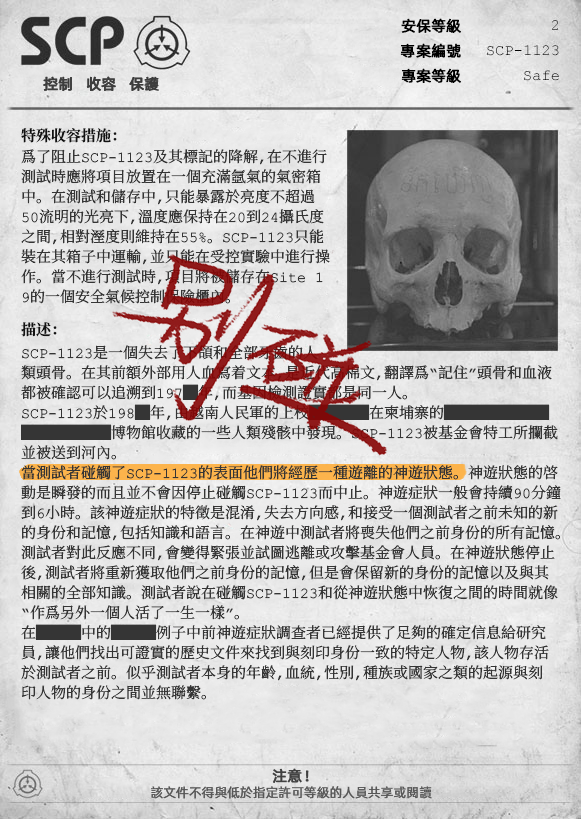
<style>
.page{position:relative;width:581px;height:819px}
.page>*{position:absolute;margin:0}
.t1{font:15px "AlibabaPuHuiTiR";color:#000000;font-weight:bold}
.t2{font:15px "AlibabaPuHuiTiR";color:#3d3d3d;font-weight:bold}
.t3{font:15px "ContainmentBreach-Bold";color:#121212}
.t4{font:15px/20px "ContainmentBreach-Regular";color:#353535}
.t5{font:15px "AlibabaPuHuiTiR";color:#414141;font-weight:bold}
.t6{font:13px "AlibabaPuHuiTiR";color:#575757}
</style>
<div class="page">
<p class="t1" style="left:401px;top:18px;width:60px;height:15px">安保等級</p>
<p class="t1" style="left:400px;top:43px;width:61px;height:15px">專案編號</p>
<p class="t2" style="left:43px;top:76px;width:115px;height:15px">控制   收容   保护</p>
<p class="t2" style="left:43px;top:76px;width:116px;height:15px">控制   收容   保護</p>
<p class="t1" style="left:401px;top:68px;width:60px;height:15px">專案等級</p>
<p class="t3" style="left:21px;top:128px;width:96px;height:15px">特殊收容措施：</p>
<p class="t4" style="left:21px;top:149px;width:309px;height:155px">爲了阻止SCP-1123及其標記的降解，在不進行<br>測試時應將項目放置在一個充滿氬氣的氣密箱<br>中。在測試和儲存中，只能暴露於亮度不超過<br>50流明的光亮下，溫度應保持在20到24攝氏度<br>之間，相對溼度則維持在55%。SCP-1123只能<br>裝在其箱子中運輸，並只能在受控實驗中進行操<br>作。當不進行測試時，項目將被儲存在Site 1<br>9的一個安全氣候控制保險櫃內。</p>
<p class="t3" style="left:21px;top:322px;width:36px;height:15px">描述：</p>
<p class="t4" style="left:21px;top:345px;width:540px;height:355px">SCP-1123是一個失去了下頜和全部牙齒的人<br>類頭骨。在其前額外部用人血寫着文本，是近代高棉文，翻譯爲“記住”頭骨和血液<br>都被確認可以追溯到197█年，而基因檢測證實都是同一人。<br>SCP-1123於198█年，由越南人民軍的上校████在柬埔寨的███████<br>██████博物館收藏的一些人類殘骸中發現。SCP-1123被基金會特工所攔截<br>並被送到河內。<br>當測試者碰觸了SCP-1123的表面他們將經歷一種遊離的神遊狀態。神遊狀態的啓<br>動是瞬發的而且並不會因停止碰觸SCP-1123而中止。神遊症狀一般會持續90分鐘<br>到6小時。該神遊症狀的特徵是混淆，失去方向感，和接受一個測試者之前未知的新<br>的身份和記憶，包括知識和語言。在神遊中測試者將喪失他們之前身份的所有記憶。<br>測試者對此反應不同，會變得緊張並試圖逃離或攻擊基金會人員。在神遊狀態停止<br>後，測試者將重新獲取他們之前身份的記憶，但是會保留新的身份的記憶以及與其<br>相關的全部知識。測試者說在碰觸SCP-1123和從神遊狀態中恢復之間的時間就像<br>“作爲另外一個人活了一生一樣”。<br>在███中的███例子中前神遊症狀調查者已經提供了足夠的確定信息給研究<br>員，讓他們找出可證實的歷史文件來找到與刻印身份一致的特定人物，該人物存活<br>於測試者之前。似乎測試者本身的年齡，血統，性別，種族或國家之類的起源與刻<br>印人物的身份之間並無聯繫。</p>
<p class="t5" style="left:272px;top:768px;width:37px;height:15px">注意！</p>
<p class="t6" style="left:151px;top:786px;width:281px;height:13px">該文件不得與低於指定許可等級的人員共享或閱讀</p>
</div>
